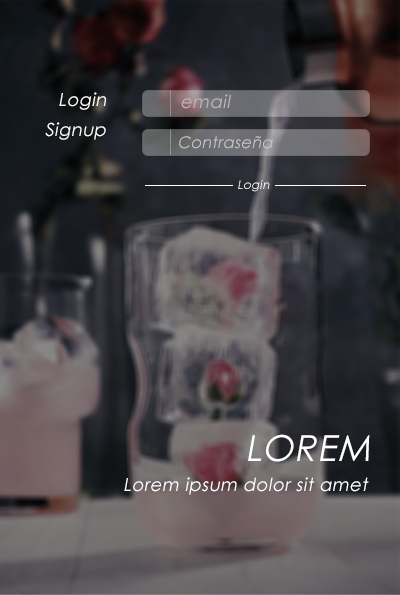
<style>
.page{position:relative;width:400px;height:595px}
.page>*{position:absolute;margin:0}
.t1{font:18px "CenturyGothic";letter-spacing:0.025em;color:#ffffff;font-style:italic}
.t2{font:18px "CenturyGothic";letter-spacing:0.025em;color:#bab7b7;font-style:italic}
.t3{font:16px "CenturyGothic";letter-spacing:0.025em;color:#c7c5c5;font-style:italic}
.t4{font:12px "CenturyGothic";letter-spacing:0.025em;color:#ffffff;font-style:italic}
.t5{font:36px "CenturyGothic";letter-spacing:0.025em;color:#ffffff;font-style:italic}
</style>
<div class="page">
<p class="t1" style="left:59px;top:92px;width:47px;height:18px">Login</p>
<p class="t2" style="left:181px;top:94px;width:50px;height:15px">email</p>
<p class="t1" style="left:45px;top:122px;width:61px;height:18px">Signup</p>
<p class="t3" style="left:179px;top:136px;width:94px;height:13px">Contraseña</p>
<p class="t4" style="left:238px;top:180px;width:32px;height:12px">Login</p>
<p class="t5" style="left:248px;top:434px;width:122px;height:28px">LOREM</p>
<p class="t1" style="left:124px;top:477px;width:245px;height:18px">Lorem ipsum dolor sit amet</p>
</div>
